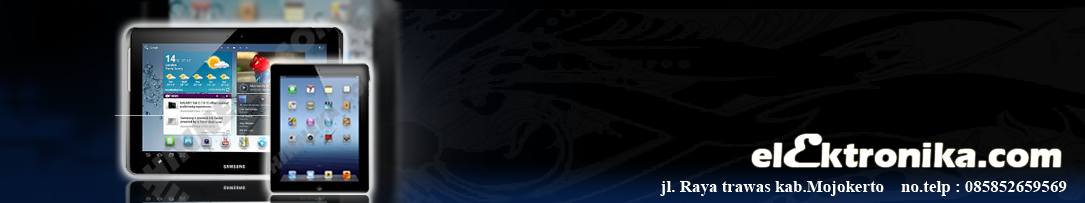
<style>
.page{position:relative;width:1085px;height:203px}
.page>*{position:absolute;margin:0}
.t1{font:36px "ErasITC-Bold";color:#ffffff}
.t2{font:48px "Magneto-Bold";color:#ffffff}
.t3{font:17px "TimesNewRomanPS-BoldMT";color:#ffffff}
</style>
<div class="page">
<p class="t1" style="left:752px;top:134px;width:309px;height:33px">el<span class="t2">E</span>ktronika.com</p>
<p class="t3" style="left:660px;top:181px;width:407px;height:15px">jl. Raya trawas kab.Mojokerto    no.telp : 085852659569</p>
</div>
